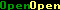
<style>
.page{position:relative;width:60px;height:10px;background:#000000}
.page>*{position:absolute;margin:0}
.t1{font:13.2px "Onesize";color:#009900;scale:0.91 1}
.t2{font:13.2px "Onesize";color:#ffff66;scale:0.91 1}
</style>
<div class="page">
<p class="t1" style="left:0px;top:1px;width:30px;height:10px">Open</p>
<p class="t2" style="left:30px;top:1px;width:30px;height:10px">Open</p>
</div>
